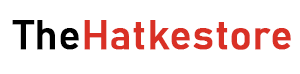
<style>
.page{position:relative;width:300px;height:74px;background:#ffffff}
.page>*{position:absolute;margin:0}
.t1{font:70px "Bahnschrift";color:#d93025;font-weight:bold}
.t2{font:70px "Bahnschrift";color:#000000;font-weight:bold}
</style>
<div class="page">
<p class="t1" style="left:12px;top:20px;width:279px;height:30px"><span class="t2">The</span>Hatkestore</p>
</div>
